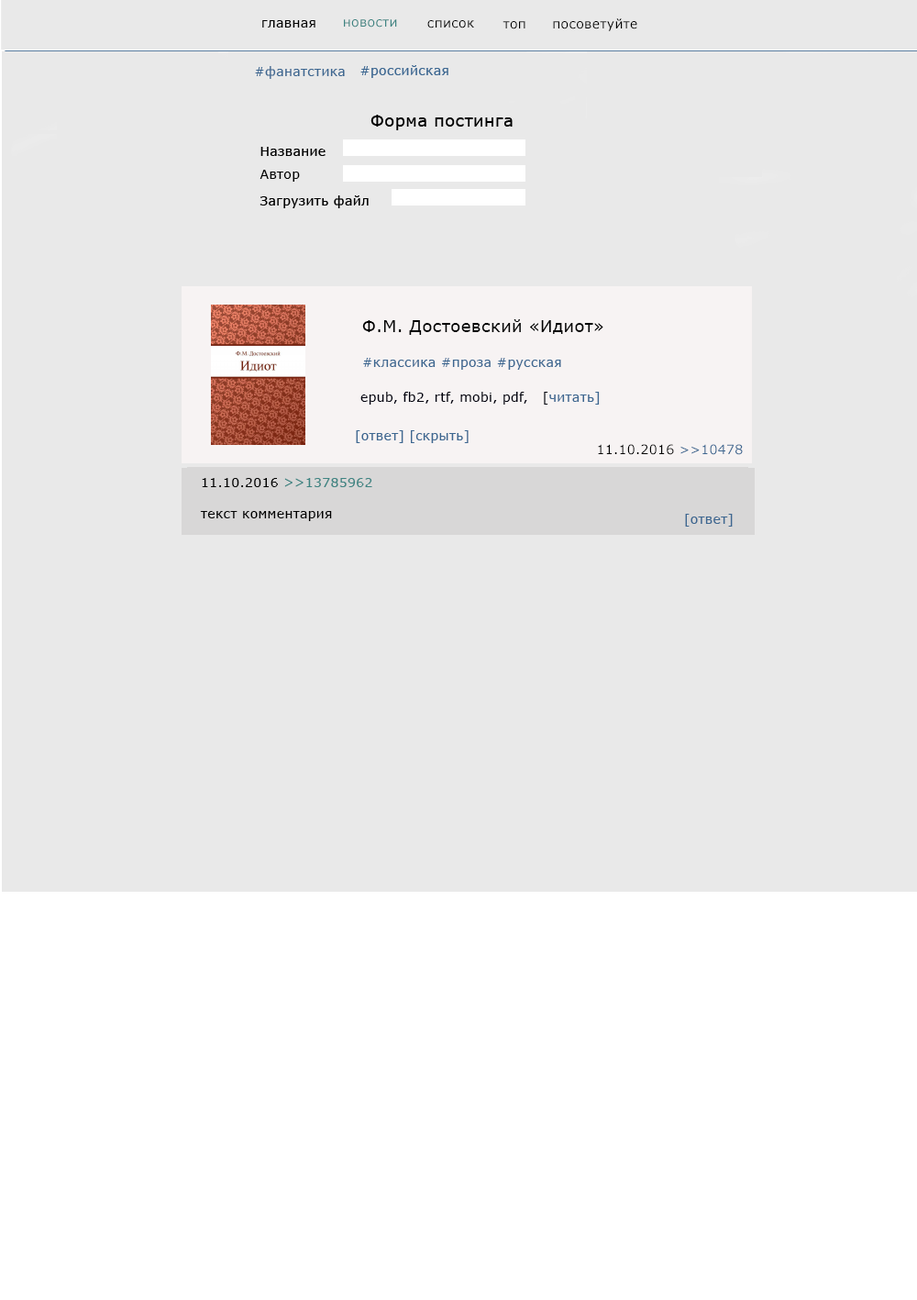
<style>
.page{position:relative;width:917px;height:1300px;background:#e9e9e9}
.page>*{position:absolute;margin:0}
.t1{font:12.8px "MSReferenceSansSerif";letter-spacing:0.025em;color:#000000}
.t2{font:12.8px "MSReferenceSansSerif";letter-spacing:0.025em;color:#3e8482}
.t3{font:12.8px "MSReferenceSansSerif";letter-spacing:0.025em;color:#010101}
.t4{font:12.8px "MSReferenceSansSerif";letter-spacing:0.025em;color:#3d6791}
.t5{font:16.5px "MSReferenceSansSerif";letter-spacing:0.025em;color:#000000}
.t6{font:12.8px "MSReferenceSansSerif";letter-spacing:0.025em;color:#00000e}
</style>
<div class="page">
<p class="t1" style="left:262px;top:20px;width:54px;height:8px">главная</p>
<p class="t2" style="left:344px;top:19px;width:53px;height:9px">новости</p>
<p class="t3" style="left:427px;top:20px;width:47px;height:8px">список</p>
<p class="t1" style="left:503px;top:21px;width:23px;height:8px">топ</p>
<p class="t1" style="left:553px;top:18px;width:85px;height:13px">посоветуйте</p>
<p class="t4" style="left:255px;top:66px;width:90px;height:13px">#фанатстика</p>
<p class="t1" style="left:260px;top:170px;width:40px;height:12px">Автор</p>
<p class="t4" style="left:362px;top:319px;width:242px;height:51px"><span class="t5">Ф.М. Достоевский «Идиот»<br><br></span>#классика #проза #русская</p>
<p class="t6" style="left:361px;top:392px;width:239px;height:13px">epub, fb2, rtf, mobi, pdf,   [<span class="t4">читать]</span></p>
<p class="t4" style="left:356px;top:430px;width:113px;height:13px">[ответ] [cкрыть]</p>
<p class="t1" style="left:598px;top:444px;width:145px;height:11px">11.10.2016 <span class="t4">&gt;&gt;10478</span></p>
<p class="t1" style="left:200px;top:478px;width:172px;height:43px">11.10.2016 <span class="t2">&gt;&gt;13785962<br></span><br>текст комментария</p>
<p class="t4" style="left:685px;top:514px;width:48px;height:13px">[ответ]</p>
</div>
